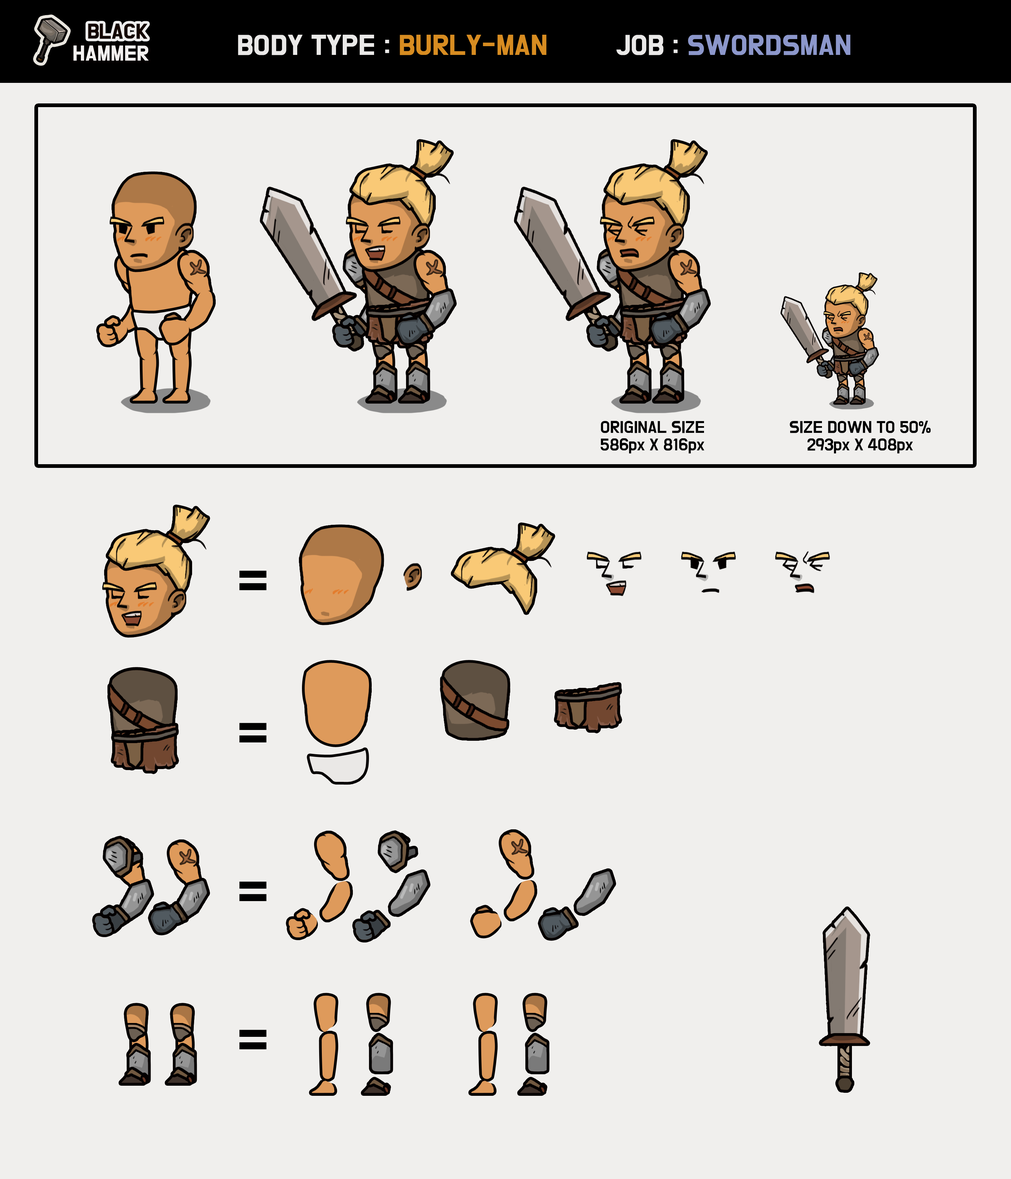
<style>
.page{position:relative;width:1011px;height:1179px;background:#f0efed}
.page>*{position:absolute;margin:0}
.t1{font:17.2px "BMDoHyeon";color:#130601;font-weight:bold}
.t2{font:23.4px "BMDoHyeon";color:#eae9e8;text-transform:uppercase;font-weight:bold}
.t3{font:23.4px "BMDoHyeon";color:#d78c21;text-transform:uppercase;font-weight:bold}
.t4{font:23.4px "BMDoHyeon";color:#8c97cb;text-transform:uppercase;font-weight:bold}
.t5{font:17.2px "BMDoHyeon";color:#f4f1f0;font-weight:bold}
.t6{font:14px/17.6px "BMDoHyeon";color:#000000}
.t7{font:14px/17.6px "BMDoHyeon";color:#000000;text-transform:uppercase}
.t8{font:55.9px "BMDoHyeon";color:#000000;text-transform:uppercase}
</style>
<div class="page">
<p class="t1" style="left:88px;top:24px;width:59px;height:15px">BLACK</p>
<p class="t2" style="left:238px;top:35px;width:309px;height:20px">body type : <span class="t3">BURLY-MAN</span></p>
<p class="t4" style="left:616px;top:35px;width:235px;height:20px"><span class="t2">job : </span>swordsman</p>
<p class="t5" style="left:73px;top:45px;width:76px;height:16px">HAMMER</p>
<p class="t6" style="left:601px;top:421px;width:103px;height:33px;text-align:center">ORIGINAL SIZE<br>586px X 816px</p>
<p class="t7" style="left:790px;top:421px;width:141px;height:33px;text-align:center">size down to 50%<br><span class="t6">293px X 408px</span></p>
<p class="t8" style="left:239px;top:571px;width:28px;height:19px">=</p>
<p class="t8" style="left:239px;top:723px;width:28px;height:20px">=</p>
<p class="t8" style="left:239px;top:882px;width:28px;height:19px">=</p>
<p class="t8" style="left:239px;top:1030px;width:28px;height:20px">=</p>
</div>
